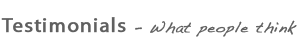
<style>
.page{position:relative;width:300px;height:50px;background:#ffffff}
.page>*{position:absolute;margin:0}
.t1{font:14.6px "Handwriting-Dakota";letter-spacing:0.04em;color:#606060;font-weight:bold}
.t2{font:20.8px "MyriadPro-Regular";letter-spacing:0.04em;color:#606060;font-weight:bold}
.t3{font:14.6px "Handwriting-Dakota";letter-spacing:0.04em;color:#606060;font-weight:bold;scale:0.96 1}
</style>
<div class="page">
<p class="t1" style="left:1px;top:17px;width:296px;height:20px"><span class="t2">Testimonials</span><span class="t3"> - </span>What people think</p>
</div>
